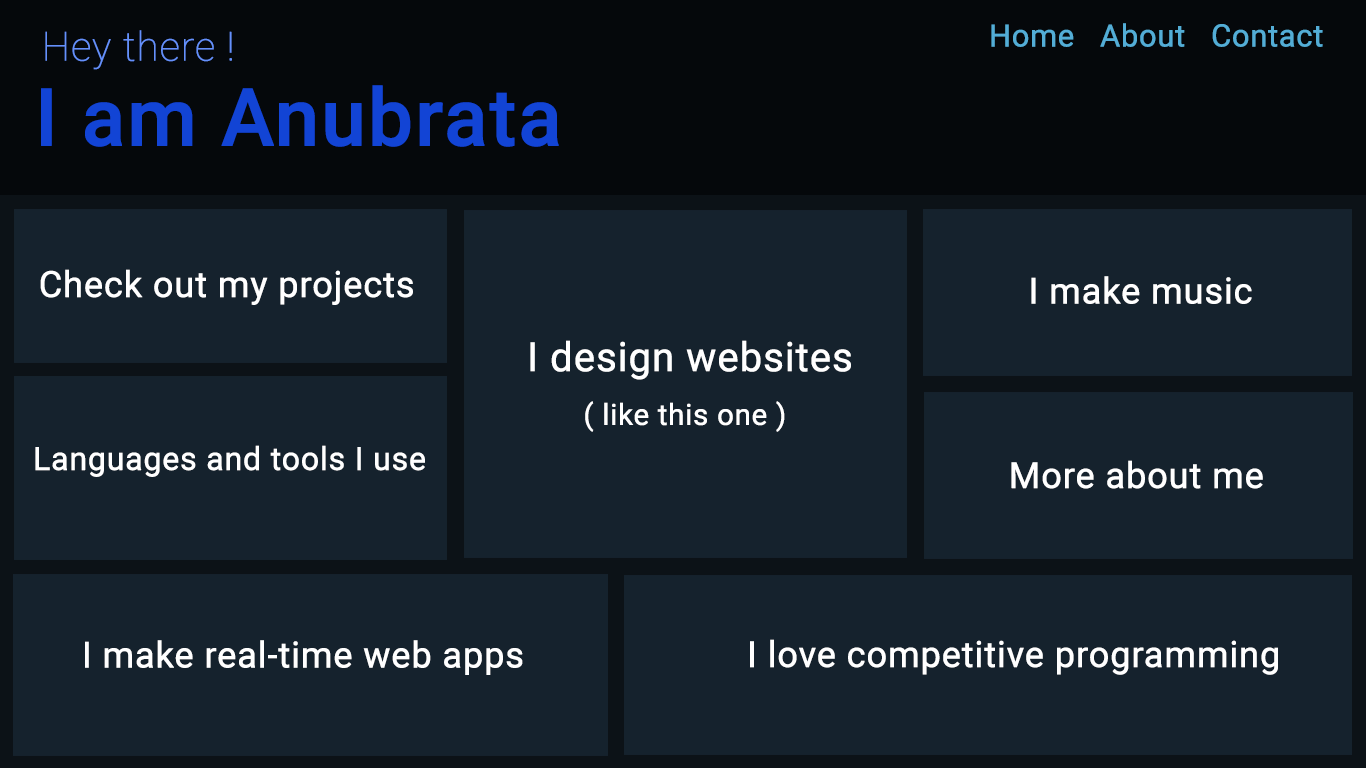
<style>
.page{position:relative;width:1366px;height:768px;background:#15222d}
.page>*{position:absolute;margin:0}
.t1{font:40px "Roboto-Thin";color:#6590fb;font-weight:bold}
.t2{font:30.7px "Roboto-Regular";color:#53add6;font-weight:bold}
.t3{font:80px "Roboto-Medium";color:#1244d5;font-weight:bold}
.t4{font:36px "Roboto-Regular";color:#ffffff;font-weight:bold}
.t5{font:40px "Roboto-Regular";color:#ffffff;font-weight:bold}
.t6{font:29.3px "Roboto-Regular";color:#ffffff;font-weight:bold}
.t7{font:32px "Roboto-Regular";color:#ffffff;font-weight:bold}
</style>
<div class="page">
<p class="t1" style="left:45px;top:30px;width:187px;height:40px">Hey there !</p>
<p class="t2" style="left:991px;top:23px;width:332px;height:24px">Home   About   Contact</p>
<p class="t3" style="left:41px;top:85px;width:518px;height:62px">I am Anubrata</p>
<p class="t4" style="left:40px;top:269px;width:373px;height:36px">Check out my projects</p>
<p class="t4" style="left:1031px;top:276px;width:221px;height:28px">I make music</p>
<p class="t5" style="left:530px;top:340px;width:321px;height:40px">I design websites</p>
<p class="t6" style="left:585px;top:401px;width:200px;height:31px">( like this one )</p>
<p class="t7" style="left:35px;top:445px;width:390px;height:32px">Languages and tools I use</p>
<p class="t4" style="left:1011px;top:460px;width:252px;height:29px">More about me</p>
<p class="t4" style="left:85px;top:640px;width:438px;height:35px">I make real-time web apps</p>
<p class="t4" style="left:750px;top:639px;width:528px;height:36px">I love competitive programming</p>
</div>
